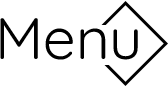
<style>
.page{position:relative;width:168px;height:86px;background:#ffffff}
.page>*{position:absolute;margin:0}
.t1{font:58.3px "Quicksand-Regular";color:#000000}
</style>
<div class="page">
<p class="t1" style="left:0px;top:18px;width:138px;height:42px">Menu</p>
</div>
